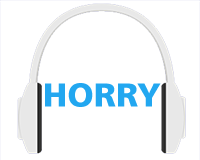
<style>
.page{position:relative;width:200px;height:160px;background:#ffffff}
.page>*{position:absolute;margin:0}
.t1{font:33.3px "Humanist777BT-BlackB";color:#22a7f0}
</style>
<div class="page">
<p class="t1" style="left:45px;top:83px;width:116px;height:24px">HORRY</p>
</div>
